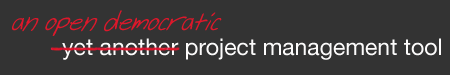
<style>
.page{position:relative;width:450px;height:75px;background:#333333}
.page>*{position:absolute;margin:0}
.t1{font:20.6px "CheyenneHandBoldItalic";color:#dd172a}
.t2{font:23px "HelveticaNeue";color:#fcfbfb}
</style>
<div class="page">
<p class="t1" style="left:12px;top:10px;width:210px;height:26px">an open democratic</p>
<p class="t2" style="left:62px;top:38px;width:379px;height:22px">yet another project management tool</p>
</div>
